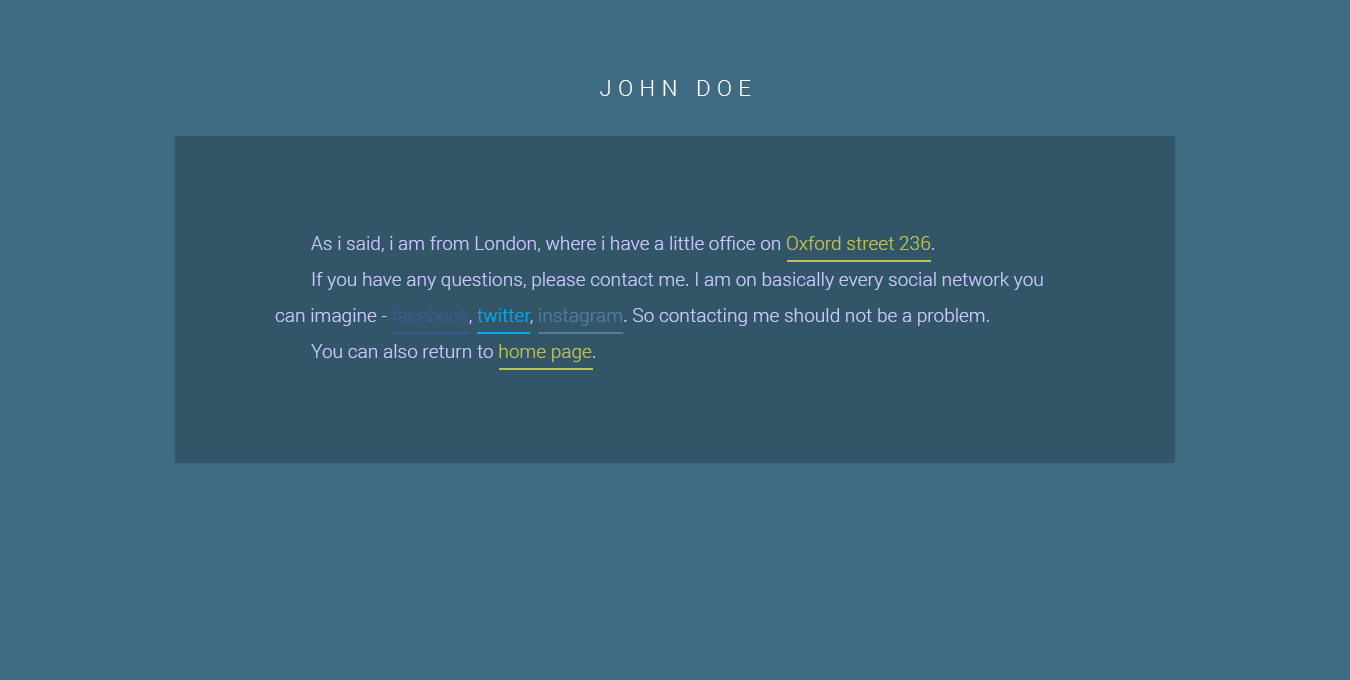
<style>
.page{position:relative;width:1350px;height:680px;background:#3e6b81}
.page>*{position:absolute;margin:0}
.t1{font:22px "Roboto-Light";letter-spacing:0.3em;color:#ffffff}
.t2{font:19px/36px "Roboto-Light";color:#c8c8ff}
.t3{font:19px/36px "Roboto-Light";color:#bfc250}
.t4{font:19px/36px "Roboto-Light";color:#3b5998}
.t5{font:19px/36px "Roboto-Light";color:#00aced}
.t6{font:19px/36px "Roboto-Light";color:#517fa4}
</style>
<div class="page">
<p class="t1" style="left:600px;top:80px;width:151px;height:16px">JOHN DOE</p>
<p class="t2" style="left:275px;top:236px;width:768px;height:126px">As i said, i am from London, where i have a little office on <span class="t3">Oxford street 236</span>.<br> If you have any questions, please contact me. I am on basically every social network you can imagine - <span class="t4">facebook</span>, <span class="t5">twitter</span>, <span class="t6">instagram</span>. So contacting me should not be a problem.<br> You can also return to <span class="t3">home page</span>.</p>
</div>
